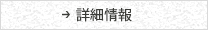
<style>
.page{position:relative;width:208px;height:30px;background:#ffffff}
.page>*{position:absolute;margin:0}
.t1{font:14px "KozGoPr6N-Regular";color:#3b3c38}
</style>
<div class="page">
<p class="t1" style="left:76px;top:7px;width:56px;height:15px">詳細情報</p>
</div>
